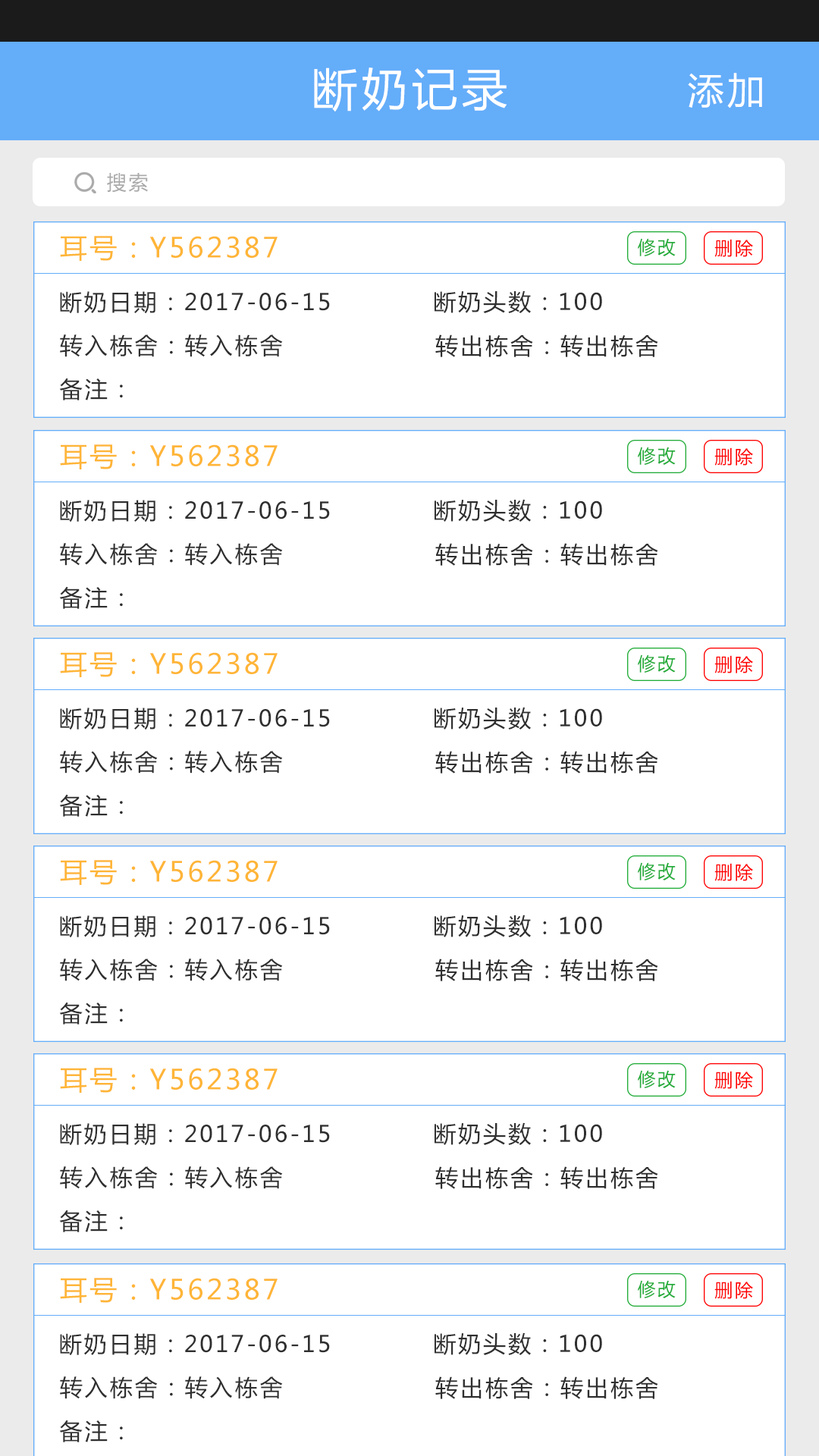
<style>
.page{position:relative;width:819px;height:1456px;background:#ffffff}
.page>*{position:absolute;margin:0}
.t1{font:45.5px "MicrosoftYaHei";letter-spacing:0.1em;color:#ffffff}
.t2{font:36.4px "MicrosoftYaHei";letter-spacing:0.1em;color:#ffffff}
.t3{font:19.7px "MicrosoftYaHei";letter-spacing:0.1em;color:#aaaaaa}
.t4{font:27.3px "MicrosoftYaHei";letter-spacing:0.1em;color:#ffb537}
.t5{font:18.2px "MicrosoftYaHei";letter-spacing:0.1em;color:#22ac38}
.t6{font:18.2px "MicrosoftYaHei";letter-spacing:0.1em;color:#ff0000}
.t7{font:22.7px "MicrosoftYaHei";letter-spacing:0.1em;color:#2f2f2f}
</style>
<div class="page">
<p class="t1" style="left:314px;top:67px;width:193px;height:45px">断奶记录</p>
<p class="t2" style="left:688px;top:73px;width:74px;height:35px">添加</p>
<p class="t3" style="left:107px;top:173px;width:41px;height:20px">搜索</p>
<p class="t4" style="left:60px;top:236px;width:218px;height:25px">耳号：Y562387</p>
<p class="t5" style="left:638px;top:238px;width:38px;height:18px">修改</p>
<p class="t6" style="left:714px;top:239px;width:39px;height:18px">删除</p>
<p class="t7" style="left:60px;top:291px;width:270px;height:23px">断奶日期：2017-06-15</p>
<p class="t7" style="left:435px;top:290px;width:167px;height:23px">断奶头数：100</p>
<p class="t7" style="left:60px;top:334px;width:223px;height:23px">转入栋舍：转入栋舍</p>
<p class="t7" style="left:435px;top:334px;width:223px;height:23px">转出栋舍：转出栋舍</p>
<p class="t7" style="left:59px;top:378px;width:64px;height:22px">备注：</p>
<p class="t4" style="left:60px;top:444px;width:218px;height:25px">耳号：Y562387</p>
<p class="t5" style="left:638px;top:447px;width:38px;height:18px">修改</p>
<p class="t6" style="left:714px;top:447px;width:39px;height:19px">删除</p>
<p class="t7" style="left:60px;top:500px;width:270px;height:22px">断奶日期：2017-06-15</p>
<p class="t7" style="left:435px;top:499px;width:167px;height:23px">断奶头数：100</p>
<p class="t7" style="left:60px;top:543px;width:223px;height:23px">转入栋舍：转入栋舍</p>
<p class="t7" style="left:435px;top:543px;width:223px;height:23px">转出栋舍：转出栋舍</p>
<p class="t7" style="left:59px;top:586px;width:64px;height:23px">备注：</p>
<p class="t4" style="left:60px;top:652px;width:218px;height:25px">耳号：Y562387</p>
<p class="t5" style="left:638px;top:654px;width:38px;height:19px">修改</p>
<p class="t6" style="left:714px;top:655px;width:39px;height:18px">删除</p>
<p class="t7" style="left:60px;top:708px;width:270px;height:22px">断奶日期：2017-06-15</p>
<p class="t7" style="left:435px;top:707px;width:167px;height:23px">断奶头数：100</p>
<p class="t7" style="left:60px;top:751px;width:223px;height:22px">转入栋舍：转入栋舍</p>
<p class="t7" style="left:435px;top:751px;width:223px;height:22px">转出栋舍：转出栋舍</p>
<p class="t7" style="left:59px;top:794px;width:64px;height:23px">备注：</p>
<p class="t4" style="left:60px;top:860px;width:218px;height:25px">耳号：Y562387</p>
<p class="t5" style="left:638px;top:862px;width:38px;height:18px">修改</p>
<p class="t6" style="left:714px;top:863px;width:39px;height:18px">删除</p>
<p class="t7" style="left:60px;top:915px;width:270px;height:23px">断奶日期：2017-06-15</p>
<p class="t7" style="left:435px;top:915px;width:167px;height:22px">断奶头数：100</p>
<p class="t7" style="left:60px;top:959px;width:223px;height:22px">转入栋舍：转入栋舍</p>
<p class="t7" style="left:435px;top:959px;width:223px;height:22px">转出栋舍：转出栋舍</p>
<p class="t7" style="left:59px;top:1002px;width:64px;height:22px">备注：</p>
<p class="t4" style="left:60px;top:1068px;width:218px;height:25px">耳号：Y562387</p>
<p class="t5" style="left:638px;top:1070px;width:38px;height:18px">修改</p>
<p class="t6" style="left:714px;top:1071px;width:39px;height:18px">删除</p>
<p class="t7" style="left:60px;top:1123px;width:270px;height:23px">断奶日期：2017-06-15</p>
<p class="t7" style="left:435px;top:1122px;width:167px;height:23px">断奶头数：100</p>
<p class="t7" style="left:60px;top:1166px;width:223px;height:23px">转入栋舍：转入栋舍</p>
<p class="t7" style="left:435px;top:1166px;width:223px;height:23px">转出栋舍：转出栋舍</p>
<p class="t7" style="left:59px;top:1210px;width:64px;height:22px">备注：</p>
<p class="t4" style="left:60px;top:1278px;width:218px;height:25px">耳号：Y562387</p>
<p class="t5" style="left:638px;top:1280px;width:38px;height:18px">修改</p>
<p class="t6" style="left:714px;top:1281px;width:39px;height:18px">删除</p>
<p class="t7" style="left:60px;top:1333px;width:270px;height:23px">断奶日期：2017-06-15</p>
<p class="t7" style="left:435px;top:1332px;width:167px;height:23px">断奶头数：100</p>
<p class="t7" style="left:60px;top:1376px;width:223px;height:23px">转入栋舍：转入栋舍</p>
<p class="t7" style="left:435px;top:1376px;width:223px;height:23px">转出栋舍：转出栋舍</p>
<p class="t7" style="left:59px;top:1420px;width:64px;height:22px">备注：</p>
</div>
